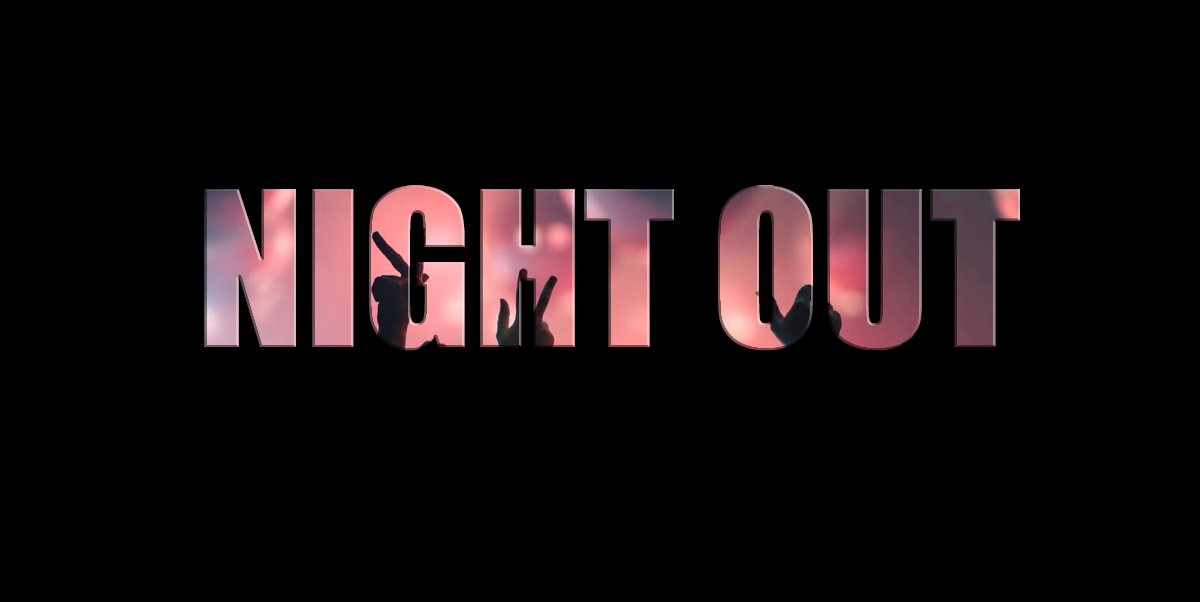
<style>
.page{position:relative;width:1200px;height:602px;background:#000000}
.page>*{position:absolute;margin:0}
.t1{font:200px "Impact"}
</style>
<div class="page">
<p class="t1" style="left:204px;top:185px;width:816px;height:166px">NIGHT OUT</p>
</div>
